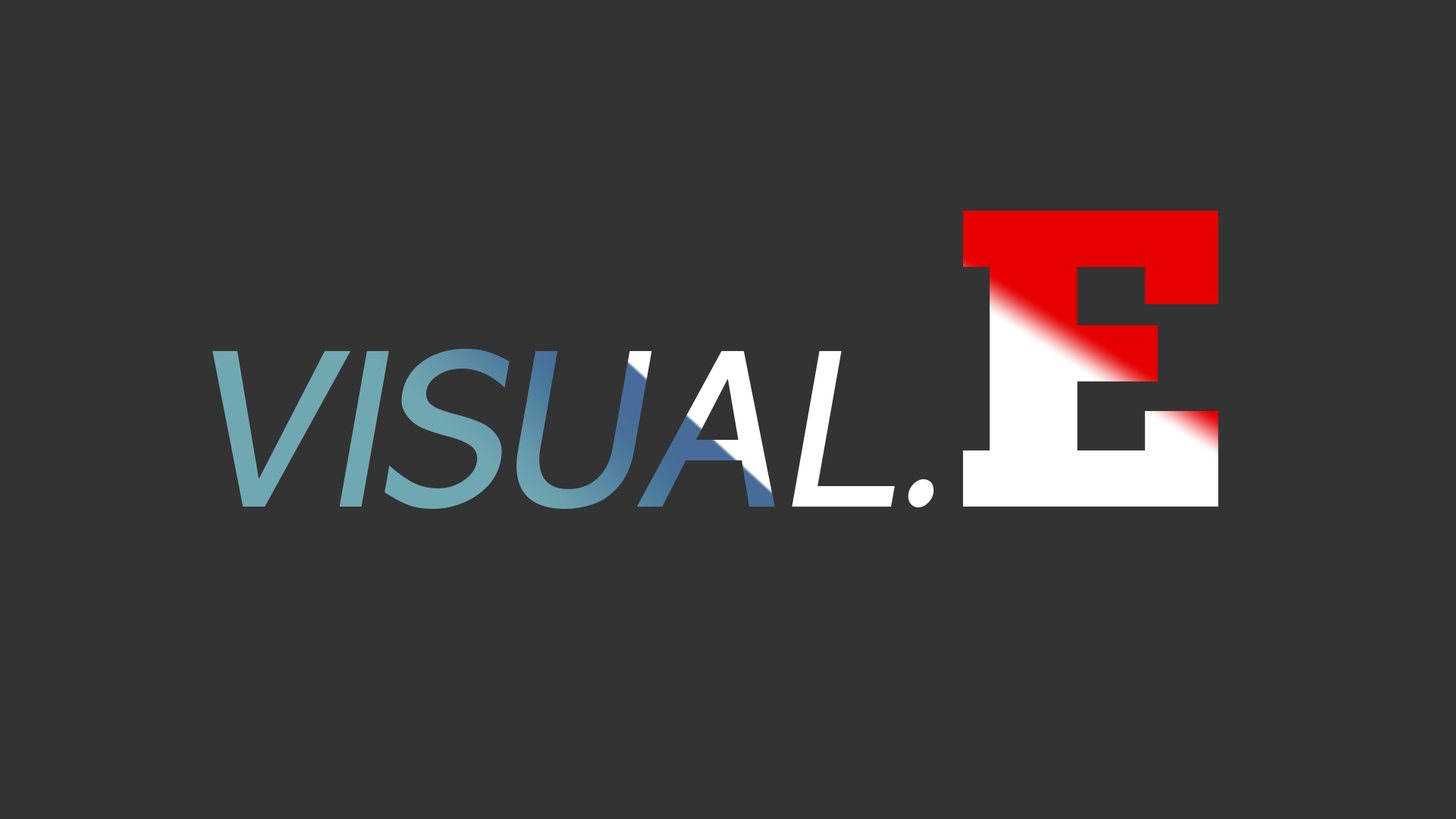
<style>
.page{position:relative;width:1456px;height:819px;background:#333333}
.page>*{position:absolute;margin:0}
.t1{font:227.5px "AbadiMT";font-style:italic}
</style>
<div class="page">
<p class="t1" style="left:212px;top:348px;width:722px;height:161px">VISUAL.</p>
</div>
